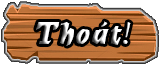
<style>
.page{position:relative;width:160px;height:65px}
.page>*{position:absolute;margin:0}
.t1{font:32px "MercuriusScript-Bold"}
</style>
<div class="page">
<p class="t1" style="left:36px;top:21px;width:95px;height:25px">Thoát!</p>
</div>
